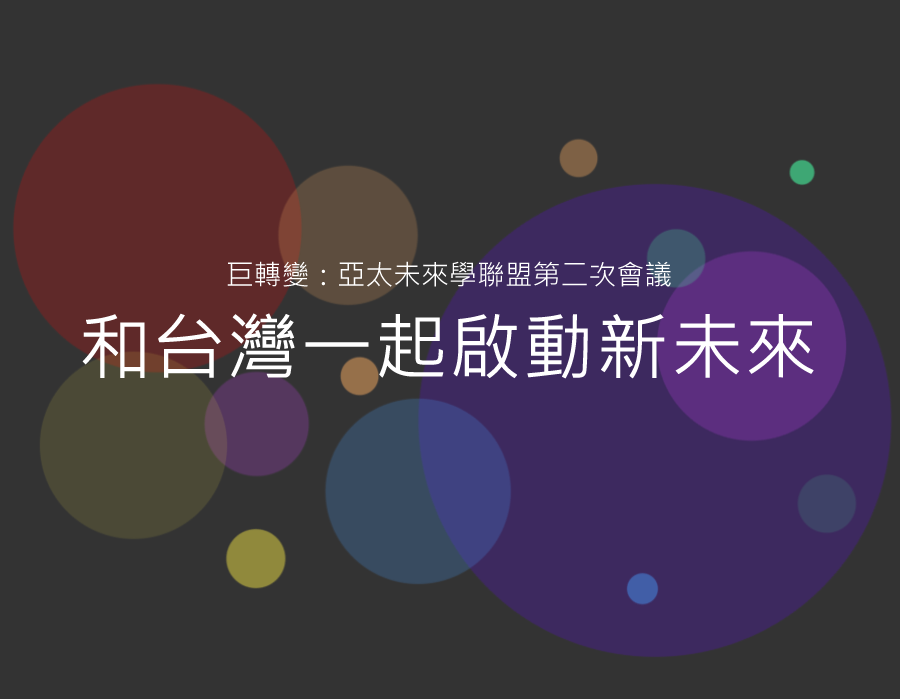
<style>
.page{position:relative;width:900px;height:699px;background:#333333}
.page>*{position:absolute;margin:0}
.t1{font:27.9px "MicrosoftJhengHeiRegular";color:#ffffff}
.t2{font:72.1px "MicrosoftJhengHeiRegular";color:#ffffff;font-weight:bold}
</style>
<div class="page">
<p class="t1" style="left:227px;top:261px;width:444px;height:26px">巨轉變：亞太未來學聯盟第二次會議</p>
<p class="t2" style="left:82px;top:313px;width:732px;height:66px">和台灣一起啟動新未來</p>
</div>
